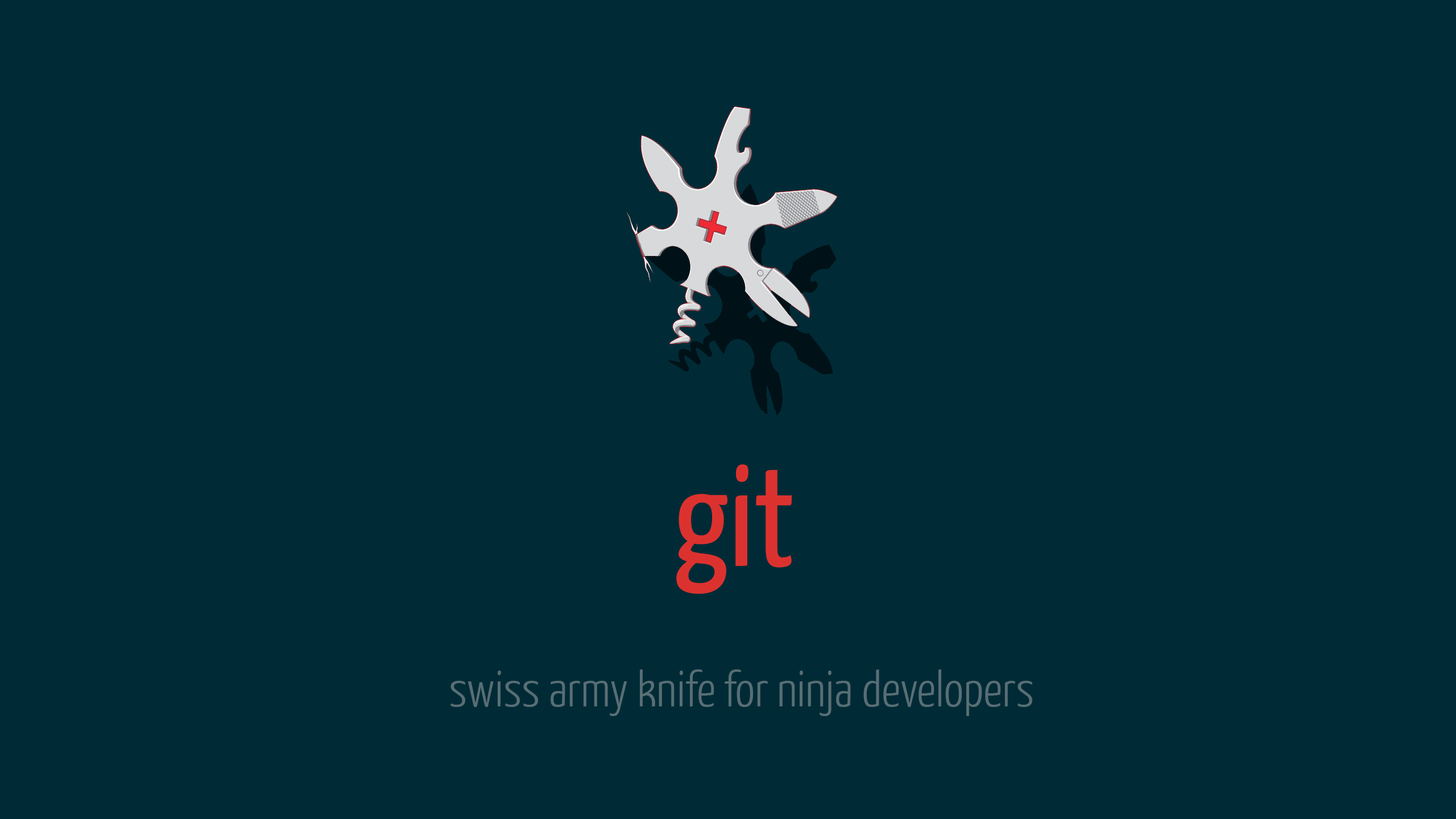
<style>
.page{position:relative;width:1456px;height:819px;background:#002b36}
.page>*{position:absolute;margin:0}
.t1{font:242px "YanoneKaffeesatz-Regular";color:#dc322f}
.t2{font:85.5px "YanoneKaffeesatz-Light";color:#586e75}
</style>
<div class="page">
<p class="t1" style="left:676px;top:464px;width:116px;height:130px">git</p>
<p class="t2" style="left:450px;top:669px;width:583px;height:47px">swiss army knife for ninja developers</p>
</div>
